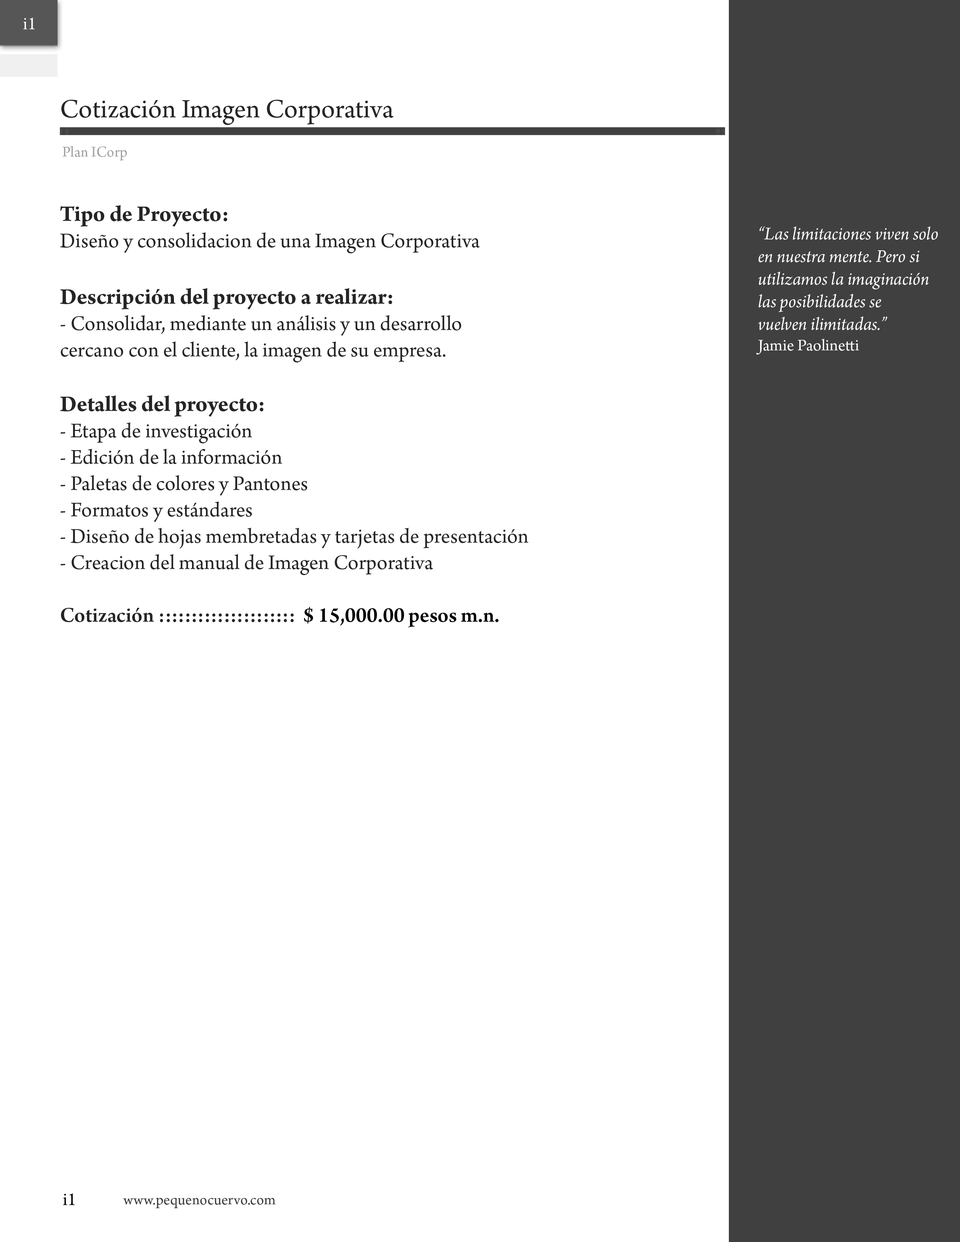
<style>
.page{position:relative;width:960px;height:1242px;background:#ffffff}
.page>*{position:absolute;margin:0}
.t1{font:18.8px "ArnoPro-Regular";color:#fcfcfc}
.t2{font:28.2px "ArnoPro-Regular";color:#252525}
.t3{font:15.7px "ArnoPro-Regular";color:#a0a0a0}
.t4{font:22px "ArnoPro-Regular";color:#252525}
.t5{font:23.5px "ArnoPro-Regular";color:#252525}
.t6{font:23.5px "ArnoPro-Bold";color:#252525}
.t7{font:22px "ArnoPro-Smbd";color:#252525}
.t8{font:22px "ArnoPro-Smbd";color:#000000}
.t9{font:18.8px "ArnoPro-Italic";color:#ffffff}
.t10{font:17.3px "ArnoPro-Regular";color:#ffffff}
.t11{font:18.8px "ArnoPro-Regular";color:#010101}
.t12{font:15.7px "ArnoPro-Regular";color:#3c3c3c}
</style>
<div class="page">
<p class="t1" style="left:23px;top:18px;width:12px;height:11px">i1</p>
<p class="t2" style="left:61px;top:100px;width:332px;height:25px">Cotización Imagen Corporativa</p>
<p class="t3" style="left:62px;top:146px;width:65px;height:15px">Plan ICorp</p>
<p class="t4" style="left:60px;top:205px;width:469px;height:423px"><span class="t5"><br></span><span class="t6">Tipo de Proyecto: <br></span>Diseño y consolidacion de una Imagen Corporativa<br><br><span class="t6">Descripción del proyecto a realizar:<br></span>- Consolidar, mediante un análisis y un desarrollo<br>cercano con el cliente, la imagen de su empresa.<br><br><span class="t6">Detalles del proyecto:</span><br>- Etapa de investigación<br>- Edición de la información<br>- Paletas de colores y Pantones<br>- Formatos y estándares<br>- Diseño de hojas membretadas y tarjetas de presentación<br>- Creacion del manual de Imagen Corporativa<br><br><span class="t7">Cotización :::::::::::::::::::::  </span><span class="t8">$ 15,000.00 pesos m.n.</span></p>
<p class="t9" style="left:756px;top:226px;width:182px;height:129px">“Las limitaciones viven solo<br>en nuestra mente. Pero si <br>utilizamos la imaginación<br>las posibilidades se<br>vuelven ilimitadas.”<br><span class="t10">Jamie Paolinetti</span></p>
<p class="t11" style="left:63px;top:1194px;width:12px;height:11px">i1</p>
<p class="t12" style="left:123px;top:1198px;width:153px;height:11px">www.pequenocuervo.com</p>
</div>
